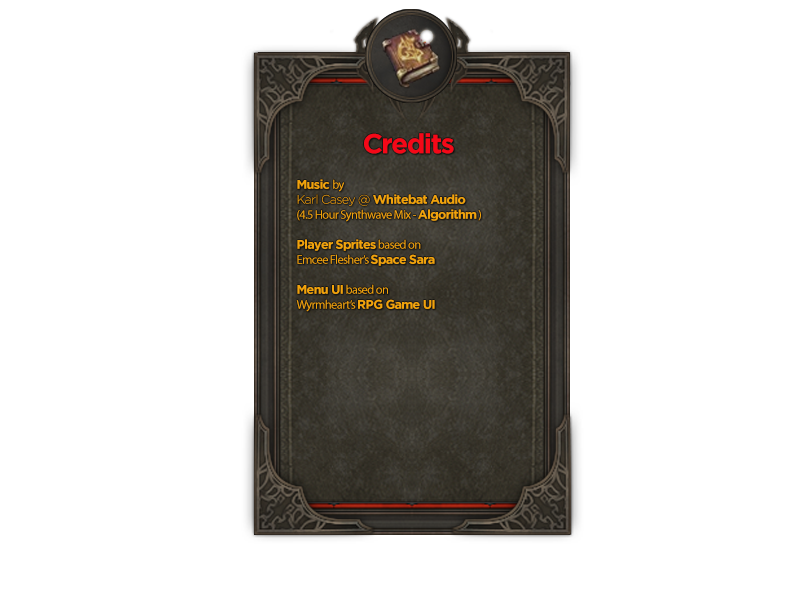
<style>
.page{position:relative;width:800px;height:600px;background:#ffffff}
.page>*{position:absolute;margin:0}
.t1{font:27.4px "Gotham-Bold";letter-spacing:-0.05em;color:#f50818}
.t2{font:12.5px "Gotham-Light";letter-spacing:-0.05em;color:#f1a30b}
.t3{font:12.5px "Gotham-Bold";letter-spacing:-0.05em;color:#f1a30b}
</style>
<div class="page">
<p class="t1" style="left:364px;top:133px;width:90px;height:21px">Credits</p>
<p class="t2" style="left:296px;top:179px;width:185px;height:133px"><span class="t3">Music </span>by <br>Karl Casey @ <span class="t3">Whitebat Audio<br></span>(4.5 Hour Synthwave Mix - A<span class="t3">lgorithm </span>)<br><br>P<span class="t3">layer Sprites based on</span> <br>Emcee Flesh<span class="t3">er’s Space Sara<br><br></span>M<span class="t3">enu UI </span>based on <br>Wyrmheart’s RPG G<span class="t3">ame UI</span></p>
</div>
